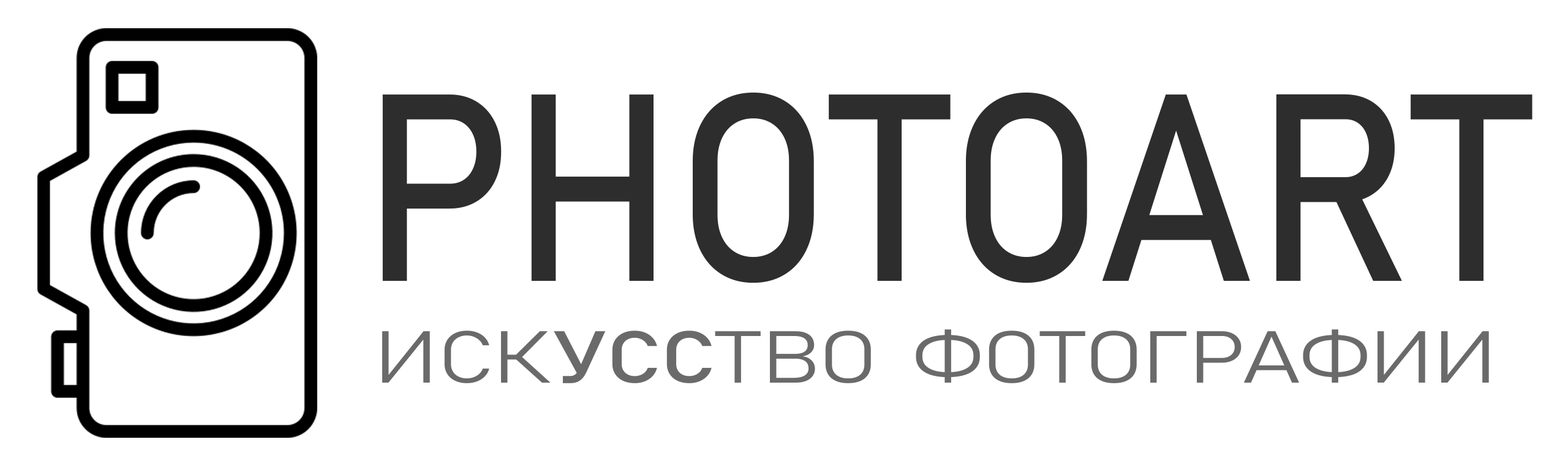
<style>
.page{position:relative;width:1568px;height:466px;background:#ffffff}
.page>*{position:absolute;margin:0}
.t1{font:261.9px "Bahnschrift";color:#2d2d2d;text-transform:uppercase;font-weight:bold;scale:0.93 1}
.t2{font:103.6px "Bahnschrift-Light";color:#6a6a6a;font-variant:small-caps;font-weight:bold;scale:1.25 1}
.t3{font:103.6px "Bahnschrift";color:#6a6a6a;font-variant:small-caps;font-weight:bold;scale:1.25 1}
</style>
<div class="page">
<p class="t1" style="left:382px;top:92px;width:1150px;height:191px">PhotoArt</p>
<p class="t2" style="left:382px;top:329px;width:1107px;height:54px">иск<span class="t3">усс</span>тво фотографии</p>
</div>
